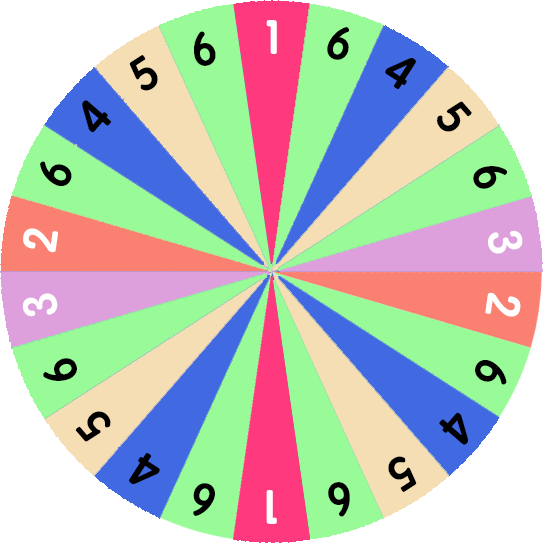
<style>
.page{position:relative;width:543px;height:543px;background:#98fb98}
.page>*{position:absolute;margin:0}
.t1{font:48px "STYuanti-TC-Bold";color:#ffffff}
.t2{font:48px "STYuanti-TC-Bold";color:#000000}
</style>
<div class="page">
<p class="t1" style="left:266px;top:20px;width:11px;height:34px">1</p>
<p class="t2" style="left:327px;top:27px;width:22px;height:33px;rotate:16deg">6</p>
<p class="t2" style="left:194px;top:31px;width:22px;height:35px;rotate:-16deg">6</p>
<p class="t2" style="left:129px;top:55px;width:29px;height:36px;rotate:-33deg">5</p>
<p class="t2" style="left:385px;top:58px;width:31px;height:31px;rotate:33deg">4</p>
<p class="t2" style="left:82px;top:100px;width:29px;height:33px;rotate:-49deg">4</p>
<p class="t2" style="left:437px;top:101px;width:35px;height:31px;rotate:49deg">5</p>
<p class="t2" style="left:40px;top:161px;width:32px;height:26px;rotate:-66deg">6</p>
<p class="t2" style="left:473px;top:166px;width:34px;height:23px;rotate:65deg">6</p>
<p class="t1" style="left:23px;top:228px;width:35px;height:25px;rotate:-82deg">2</p>
<p class="t1" style="left:488px;top:230px;width:35px;height:24px;rotate:82deg">3</p>
<p class="t1" style="left:22px;top:293px;width:36px;height:24px;rotate:-98deg">3</p>
<p class="t1" style="left:485px;top:292px;width:36px;height:25px;rotate:98deg">2</p>
<p class="t2" style="left:43px;top:358px;width:34px;height:23px;rotate:-115deg">6</p>
<p class="t2" style="left:475px;top:359px;width:32px;height:26px;rotate:115deg">6</p>
<p class="t2" style="left:75px;top:411px;width:36px;height:31px;rotate:-131deg">5</p>
<p class="t2" style="left:439px;top:412px;width:29px;height:33px;rotate:131deg">4</p>
<p class="t2" style="left:129px;top:453px;width:31px;height:31px;rotate:-147deg">4</p>
<p class="t2" style="left:388px;top:456px;width:29px;height:36px;rotate:147deg">5</p>
<p class="t2" style="left:193px;top:483px;width:22px;height:33px;rotate:-164deg">6</p>
<p class="t2" style="left:328px;top:482px;width:22px;height:35px;rotate:164deg">6</p>
<p class="t1" style="left:266px;top:490px;width:11px;height:34px;rotate:180deg">1</p>
</div>
